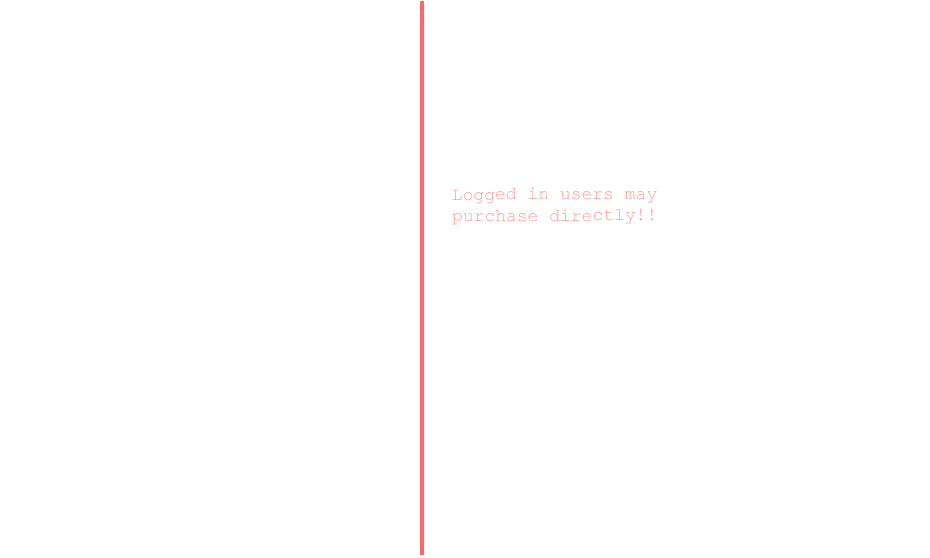
<style>
.page{position:relative;width:930px;height:558px;background:#ffffff}
.page>*{position:absolute;margin:0}
.t1{font:18px "CourierNewPSMT";color:#ff9999}
</style>
<div class="page">
<p class="t1" style="left:452px;top:187px;width:205px;height:38px">Logged in users may purchase directly!!</p>
</div>
